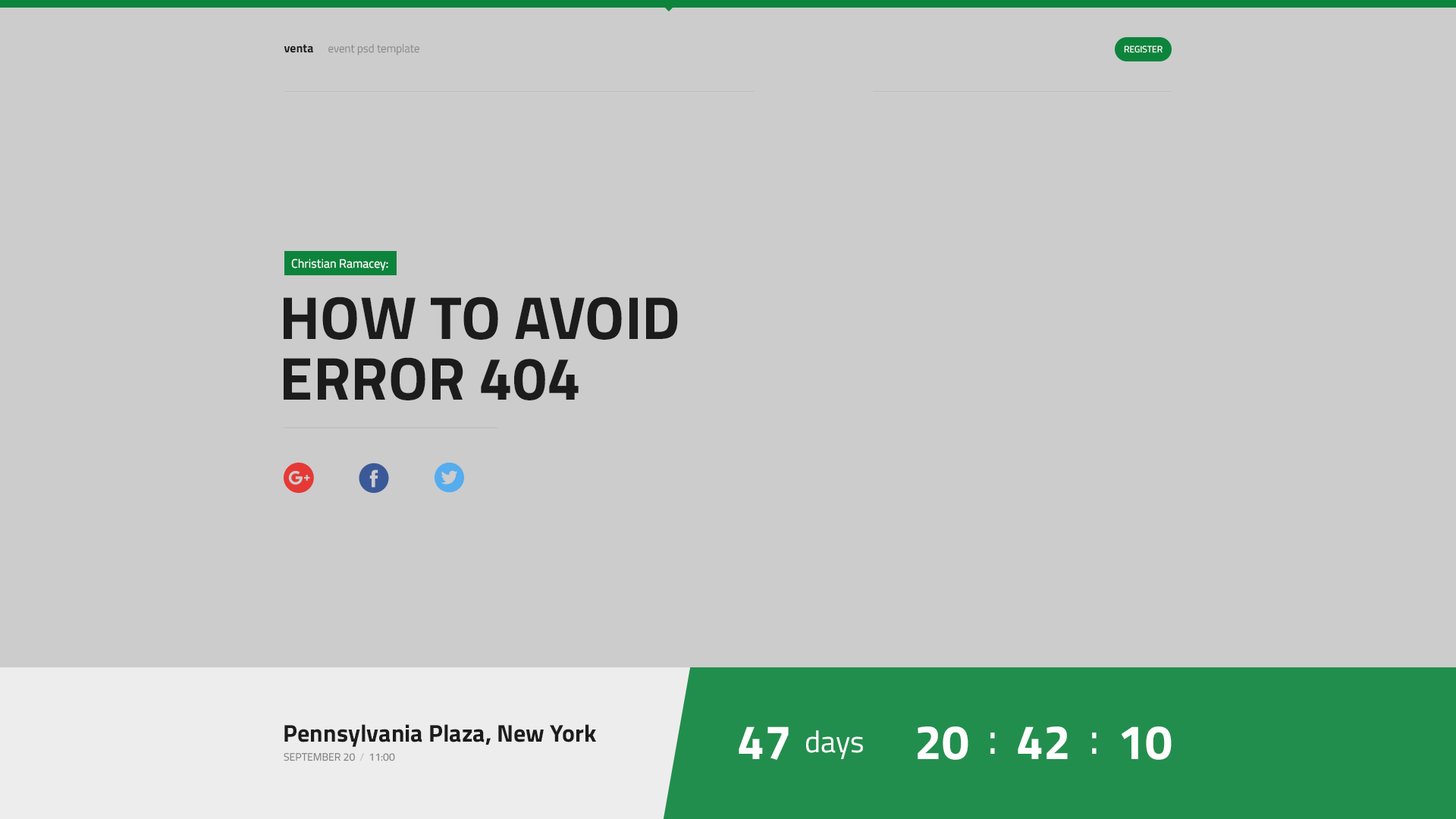
<style>
.page{position:relative;width:1456px;height:819px;background:#cccccc}
.page>*{position:absolute;margin:0}
.t1{font:12.1px "TitilliumWeb-Bold";color:#1c1c1c}
.t2{font:11.4px "TitilliumWeb-Light";color:#858585}
.t3{font:9.1px "TitilliumWeb-Regular";color:#ffffff;text-transform:uppercase}
.t4{font:12.1px "TitilliumWeb-Regular";color:#ffffff}
.t5{font:60.7px/60.7px "TitilliumWeb-Bold";color:#1c1c1c;text-transform:uppercase}
.t6{font:24.3px "TitilliumWeb-Bold";color:#1c1c1c}
.t7{font:48.5px "TitilliumWeb-Bold";color:#ffffff}
.t8{font:30.3px "TitilliumWeb-Regular";color:#ffffff}
.t9{font:48.5px "TitilliumWeb-Regular";color:#ffffff}
.t10{font:10.6px "TitilliumWeb-Regular";color:#808080;text-transform:uppercase}
.t11{font:10.6px "TitilliumWeb-Regular";color:#bfbfbf;text-transform:uppercase}
</style>
<div class="page">
<p class="t1" style="left:284px;top:44px;width:29px;height:9px">venta</p>
<p class="t2" style="left:328px;top:44px;width:91px;height:11px">event psd template</p>
<p class="t3" style="left:1124px;top:45px;width:39px;height:8px">Register</p>
<p class="t4" style="left:291px;top:259px;width:97px;height:12px">Christian Ramacey:</p>
<p class="t5" style="left:284px;top:297px;width:394px;height:103px">How to avoid <br>Error 404</p>
<p class="t6" style="left:284px;top:724px;width:312px;height:23px">Pennsylvania Plaza, New York</p>
<p class="t7" style="left:739px;top:726px;width:50px;height:34px">47</p>
<p class="t8" style="left:806px;top:730px;width:57px;height:29px">days</p>
<p class="t7" style="left:918px;top:726px;width:50px;height:34px">20</p>
<p class="t9" style="left:990px;top:733px;width:5px;height:21px">:</p>
<p class="t7" style="left:1018px;top:726px;width:50px;height:33px">42</p>
<p class="t9" style="left:1092px;top:733px;width:5px;height:21px">:</p>
<p class="t7" style="left:1121px;top:726px;width:51px;height:34px">10</p>
<p class="t10" style="left:284px;top:753px;width:111px;height:8px">September 20  <span class="t11">/  </span>11:00</p>
</div>
